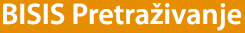
<style>
.page{position:relative;width:245px;height:33px;background:#e68d00}
.page>*{position:absolute;margin:0}
.t1{font:30px "MyriadPro-Semibold";color:#ffffff}
</style>
<div class="page">
<p class="t1" style="left:3px;top:3px;width:239px;height:28px">BISIS Pretraživanje</p>
</div>
